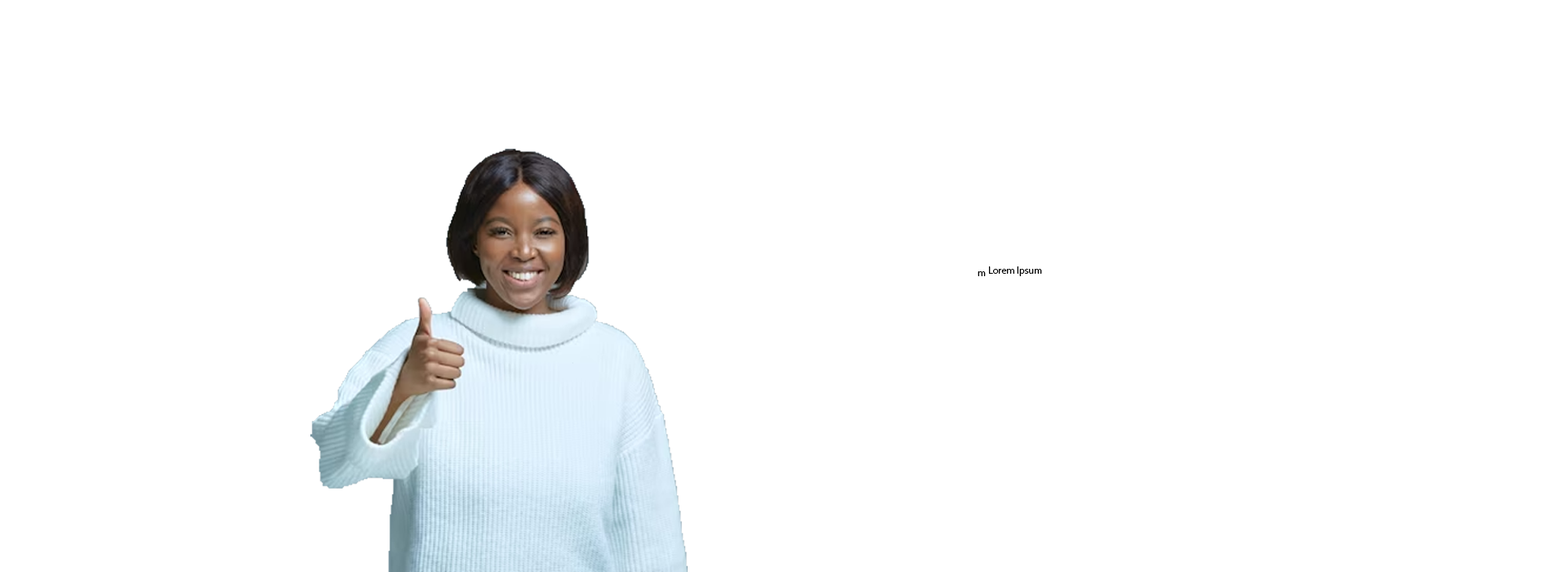
<style>
.page{position:relative;width:1568px;height:572px;background:#ffffff}
.page>*{position:absolute;margin:0}
.t1{font:9.8px "MyriadPro-Regular";color:#000000}
</style>
<div class="page">
<p class="t1" style="left:989px;top:266px;width:53px;height:10px">Lorem Ipsum</p>
<p class="t1" style="left:978px;top:271px;width:8px;height:5px">m</p>
</div>
